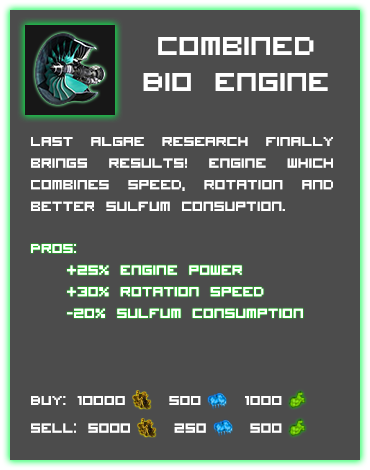
<style>
.page{position:relative;width:370px;height:470px;background:#4c4c4c}
.page>*{position:absolute;margin:0}
.t1{font:36px/12px "VisitorTT1BRK";color:#ffffff}
.t2{font:18px "VisitorTT1BRK";color:#ffffff}
</style>
<div class="page">
<p class="t1" style="left:143px;top:37px;width:185px;height:54px;text-align:center">Combined <br><br><br>Bio Engine</p>
<p class="t2" style="left:31px;top:137px;width:302px;height:74px;text-align:justify">Last algae research finally brings results! Engine which combines speed, rotation and better sulfum consuption.</p>
<p class="t2" style="left:31px;top:244px;width:272px;height:74px;text-align:justify">Pros:<br> +25% engine power<br> +30% rotation speed<br> -20% Sulfum consumption</p>
<p class="t2" style="left:31px;top:396px;width:251px;height:37px">Buy: 10000    500    1000<br><br>Sell: 5000    250    500</p>
</div>
